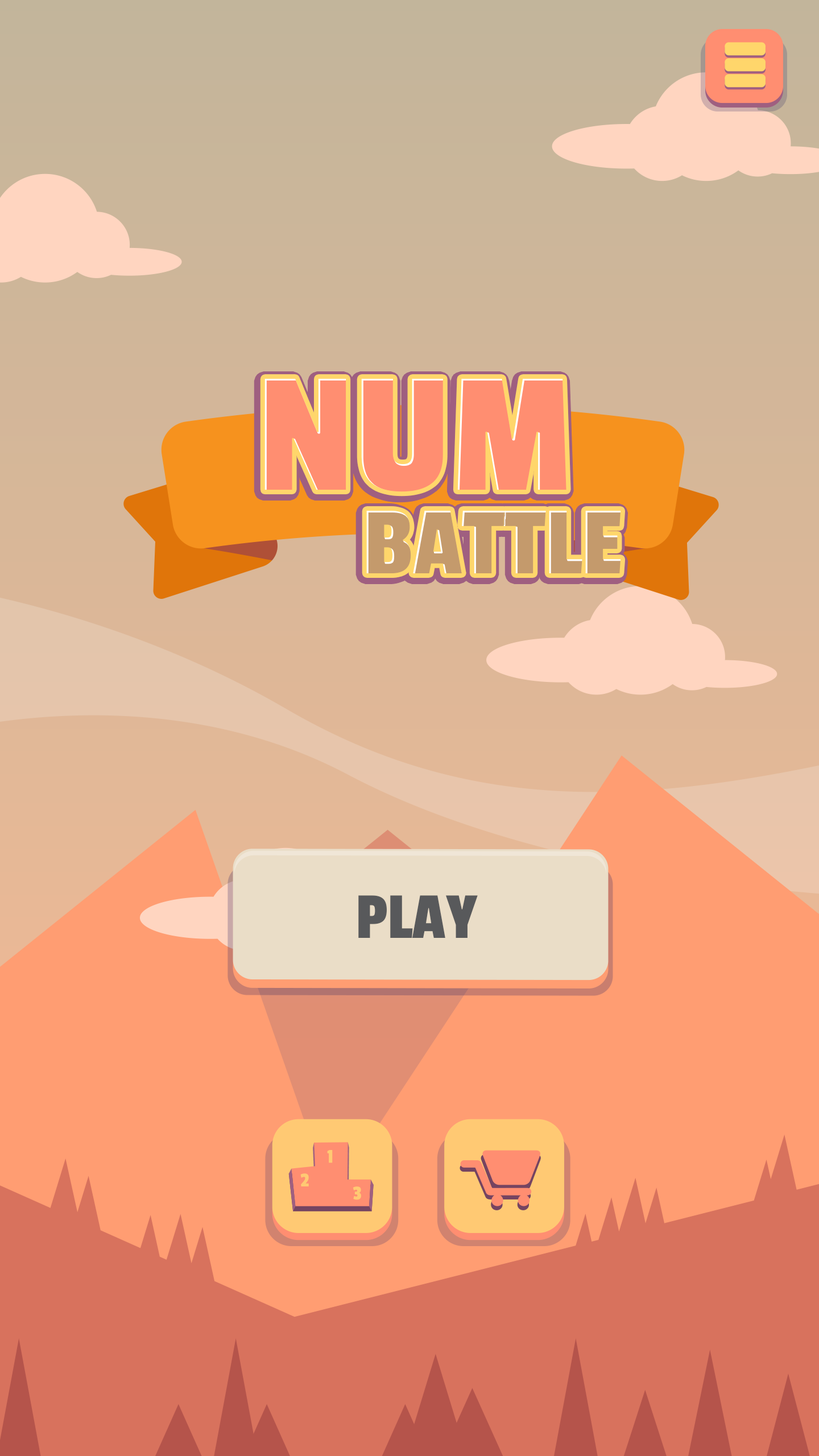
<style>
.page{position:relative;width:819px;height:1456px}
.page>*{position:absolute;margin:0}
.t1{font:178.6px "PassionOne-Regular";color:#ff8e71;text-transform:uppercase}
.t2{font:68.2px "PassionOne-Regular";color:#58595b}
</style>
<div class="page">
<p class="t1" style="left:264px;top:379px;width:302px;height:113px">NUM</p>
<p class="t2" style="left:358px;top:895px;width:120px;height:43px">PLAY</p>
</div>
